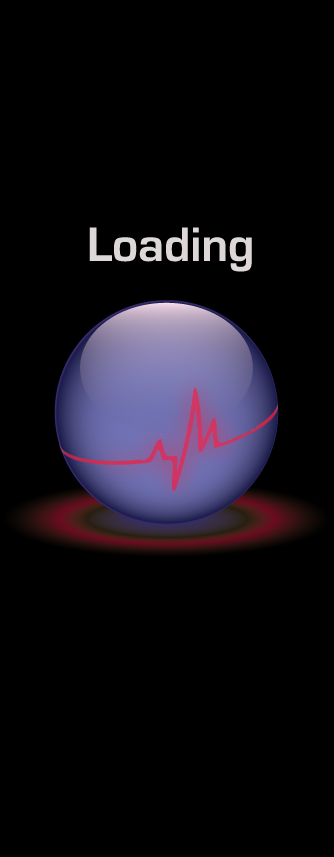
<style>
.page{position:relative;width:334px;height:857px;background:#000000}
.page>*{position:absolute;margin:0}
.t1{font:50px "EurostileBold";color:#ddd7d7}
</style>
<div class="page">
<p class="t1" style="left:89px;top:227px;width:163px;height:45px">Loading</p>
</div>
